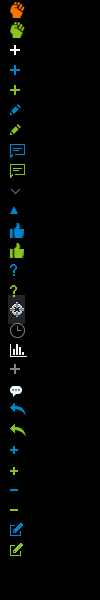
<style>
.page{position:relative;width:100px;height:600px;background:#000000}
.page>*{position:absolute;margin:0}
.t1{font:20px "MicrosoftYaHei-Bold";color:#768696}
</style>
<div class="page">
<p class="t1" style="left:10px;top:364px;width:10px;height:10px">+</p>
</div>
